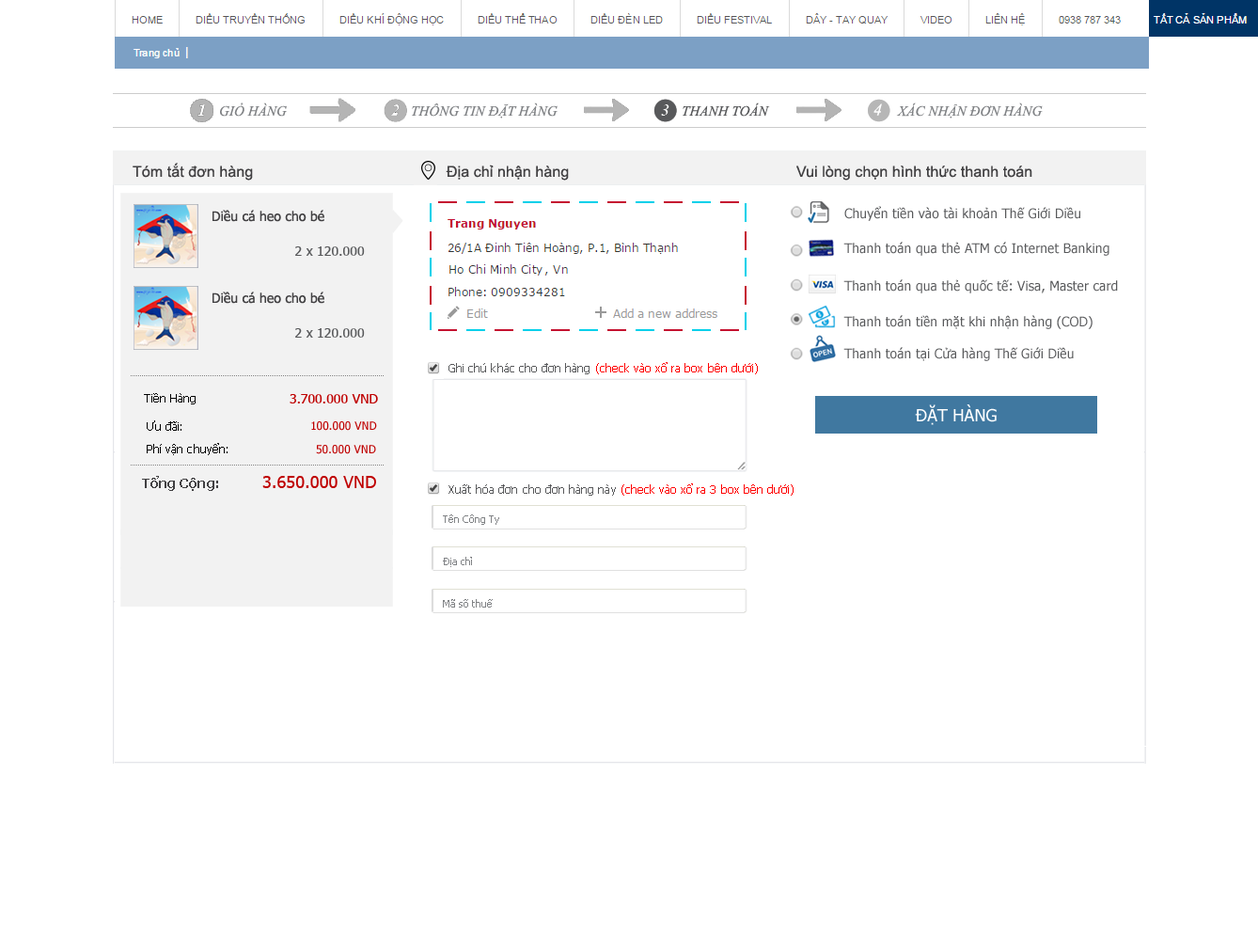
<style>
.page{position:relative;width:1258px;height:948px;background:#ffffff}
.page>*{position:absolute;margin:0}
.t1{font:14.1px "TimesNewRomanPS-ItalicMT";letter-spacing:0.005em;color:#808285}
.t2{font:14.1px "TimesNewRomanPS-ItalicMT";letter-spacing:0.005em;color:#58595b}
.t3{font:16.9px "TimesNewRomanPS-ItalicMT";letter-spacing:0.005em;color:#ffffff}
.t4{font:15px "ArialMT";letter-spacing:0.005em;color:#414042}
.t5{font:13.2px "Tahoma";letter-spacing:0.005em;color:#414042}
.t6{font:13.2px "Tahoma";letter-spacing:0.005em;color:#58595b}
.t7{font:11.3px "Tahoma";letter-spacing:0.005em;color:#ff0000}
.t8{font:11.3px "Tahoma";letter-spacing:0.005em;color:#58595b}
.t9{font:11.3px "Tahoma";letter-spacing:0.005em;color:#000000}
.t10{font:13.2px "Tahoma";letter-spacing:0.005em;color:#bf0000}
.t11{font:16.9px "Tahoma";letter-spacing:0.005em;color:#ffffff}
.t12{font:11.3px "Tahoma";letter-spacing:0.005em;color:#bf0000}
.t13{font:13.2px "Tahoma-Bold";letter-spacing:0.005em;color:#414042}
.t14{font:16.9px "Tahoma";letter-spacing:0.005em;color:#bf0000}
.t15{font:10.3px "Tahoma";letter-spacing:0.005em;color:#808285}
</style>
<div class="page">
<p class="t1" style="left:220px;top:102px;width:67px;height:15px">GIỎ HÀNG</p>
<p class="t1" style="left:412px;top:102px;width:146px;height:16px">THÔNG TIN ĐẶT HÀNG</p>
<p class="t2" style="left:683px;top:102px;width:87px;height:15px">THANH TOÁN</p>
<p class="t3" style="left:874px;top:103px;width:8px;height:13px">4</p>
<p class="t1" style="left:896px;top:102px;width:147px;height:16px">XÁC NHẬN ĐƠN HÀNG</p>
<p class="t4" style="left:133px;top:163px;width:120px;height:18px">Tóm tắt đơn hàng</p>
<p class="t4" style="left:446px;top:165px;width:123px;height:16px">Địa chỉ nhận hàng</p>
<p class="t4" style="left:796px;top:165px;width:236px;height:16px">Vui lòng chọn hình thức thanh toán</p>
<p class="t5" style="left:213px;top:210px;width:111px;height:12px">Diều cá heo cho bé</p>
<p class="t6" style="left:844px;top:206px;width:236px;height:15px">Chuyển tiền vào tài khoản Thế Giới Diều</p>
<p class="t6" style="left:843px;top:242px;width:267px;height:14px">Thanh toán qua thẻ ATM có Internet Banking</p>
<p class="t6" style="left:295px;top:246px;width:70px;height:10px">2 x 120.000</p>
<p class="t6" style="left:843px;top:279px;width:275px;height:14px">Thanh toán qua thẻ quốc tế: Visa, Master card</p>
<p class="t5" style="left:213px;top:291px;width:111px;height:13px">Diều cá heo cho bé</p>
<p class="t6" style="left:843px;top:315px;width:250px;height:14px">Thanh toán tiền mặt khi nhận hàng (COD)</p>
<p class="t6" style="left:295px;top:328px;width:70px;height:10px">2 x 120.000</p>
<p class="t6" style="left:843px;top:347px;width:231px;height:14px">Thanh toán tại Cửa hàng Thế Giới Diều</p>
<p class="t7" style="left:449px;top:362px;width:309px;height:12px"><span class="t8">Ghi chú khác cho đơn hàng </span>(check vào xổ ra box bên dưới)</p>
<p class="t9" style="left:144px;top:393px;width:52px;height:11px">Tiền Hàng</p>
<p class="t10" style="left:290px;top:394px;width:88px;height:9px">3.700.000 VND</p>
<p class="t11" style="left:915px;top:404px;width:82px;height:21px">ĐẶT HÀNG</p>
<p class="t9" style="left:147px;top:420px;width:34px;height:11px">Ưu đãi:</p>
<p class="t12" style="left:311px;top:421px;width:66px;height:10px">100.000 VND</p>
<p class="t9" style="left:147px;top:443px;width:81px;height:12px">Phí vận chuyển:</p>
<p class="t12" style="left:316px;top:445px;width:60px;height:9px">50.000 VND</p>
<p class="t13" style="left:142px;top:476px;width:76px;height:15px">Tổng Cộng:</p>
<p class="t14" style="left:262px;top:476px;width:114px;height:12px">3.650.000 VND</p>
<p class="t7" style="left:449px;top:483px;width:345px;height:13px"><span class="t8">Xuất hóa đơn cho đơn hàng này </span>(check vào xổ ra 3 box bên dưới)</p>
<p class="t15" style="left:443px;top:514px;width:56px;height:11px">Tên Công Ty</p>
<p class="t15" style="left:443px;top:557px;width:29px;height:10px">Địa chỉ</p>
<p class="t15" style="left:443px;top:599px;width:50px;height:8px">Mã số thuế</p>
</div>
